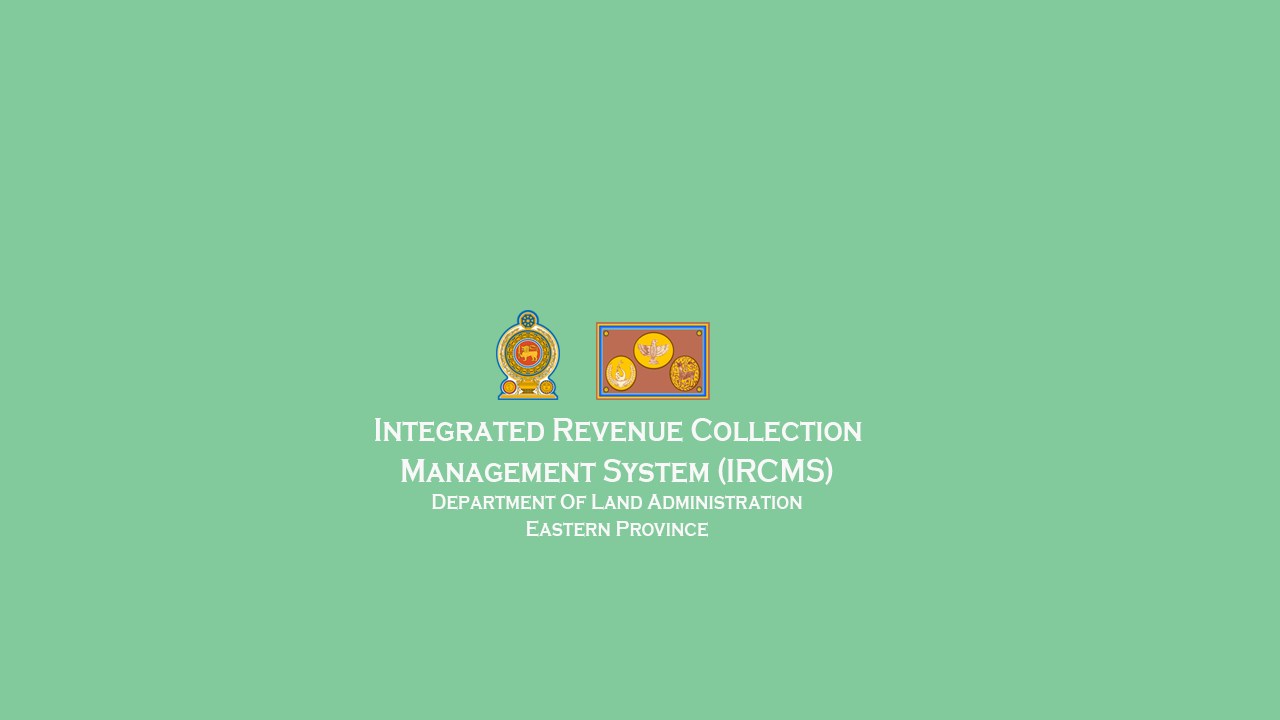
<style>
.page{position:relative;width:1280px;height:720px;background:#82ca9c}
.page>*{position:absolute;margin:0}
.t1{font:34px "CopperplateGothic-Bold";color:#f9f8f8;scale:0.8 1}
.t2{font:11.3px "CopperplateGothic-Bold";color:#000000;scale:0.8 1}
.t3{font:22.7px "CopperplateGothic-Bold";color:#f9f8f8;scale:0.8 1}
</style>
<div class="page">
<p class="t1" style="left:375px;top:418px;width:487px;height:119px;text-align:center"><span class="t2"> </span>Integrated Revenue Collection Management System (IRCMS)<br><span class="t3">Department Of Land Administration<br>Eastern Province</span></p>
</div>
